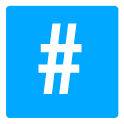
<style>
.page{position:relative;width:124px;height:124px;background:#00a8ff}
.page>*{position:absolute;margin:0}
.t1{font:108px "MyriadPro-BoldCond";color:#ffffff}
</style>
<div class="page">
<p class="t1" style="left:38px;top:23px;width:44px;height:71px">#</p>
</div>
